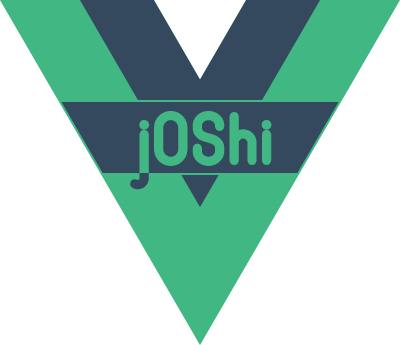
<style>
.page{position:relative;width:400px;height:345px;background:#ffffff}
.page>*{position:absolute;margin:0}
.t1{font:72px "CronusRound";letter-spacing:0.06em;color:#41b883}
</style>
<div class="page">
<p class="t1" style="left:132px;top:113px;width:138px;height:75px">j0Shi</p>
</div>
